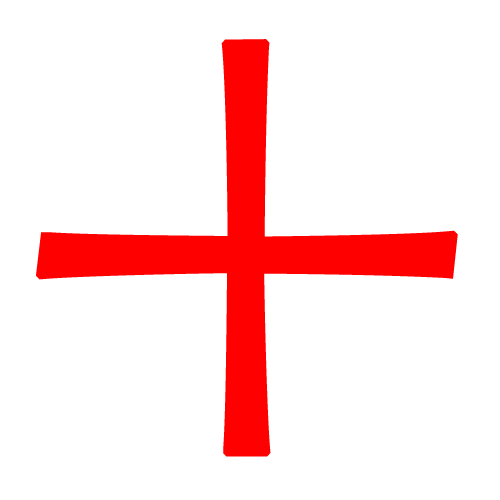
<style>
.page{position:relative;width:500px;height:500px;background:#ffffff}
.page>*{position:absolute;margin:0}
.t1{font:986px "QumpellkaNo12";color:#ff0000;font-weight:bold}
</style>
<div class="page">
<p class="t1" style="left:36px;top:39px;width:422px;height:418px">+</p>
</div>
